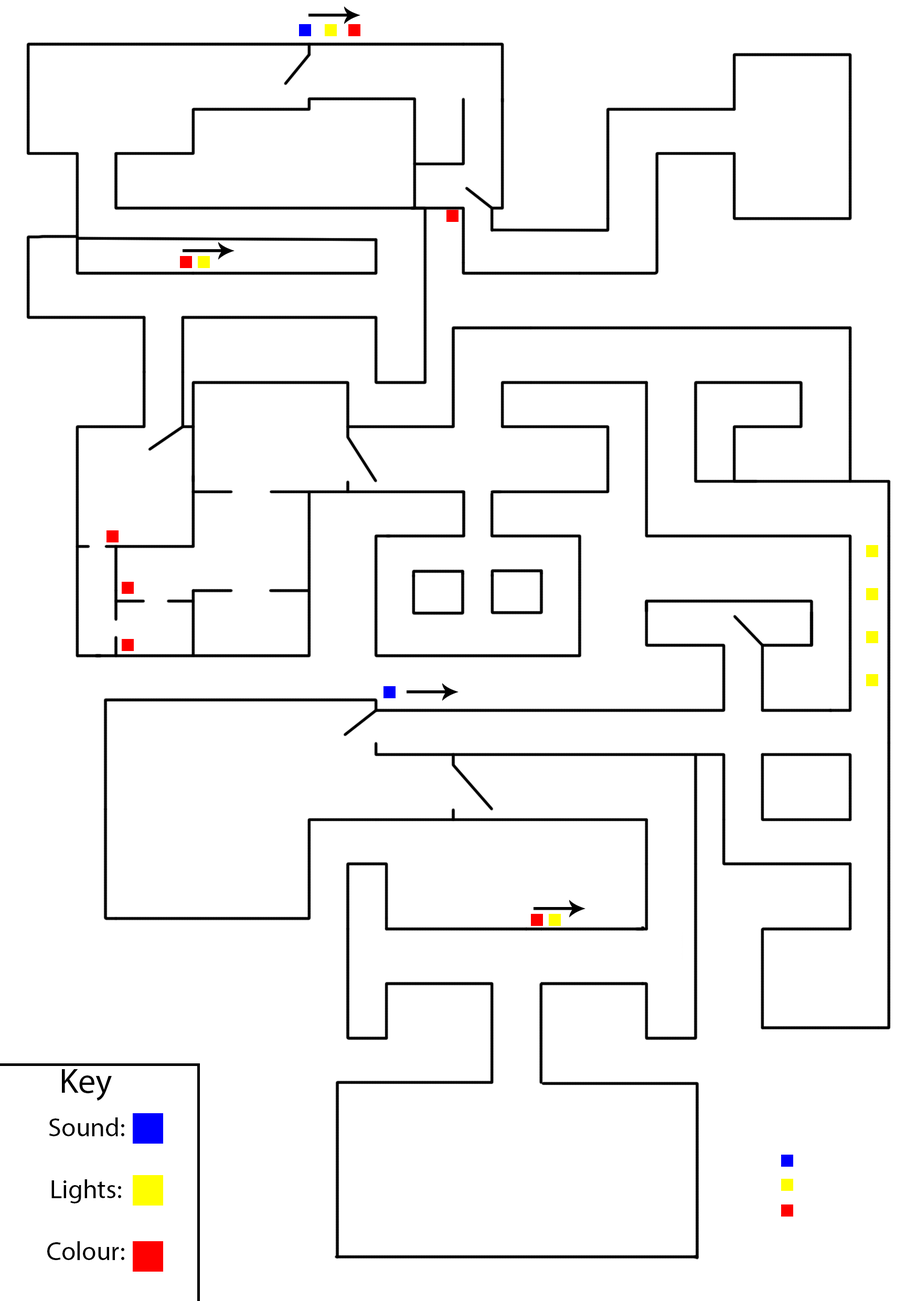
<style>
.page{position:relative;width:917px;height:1301px;background:#ffffff}
.page>*{position:absolute;margin:0}
.t1{font:35px "MyriadPro-Regular";color:#000000}
.t2{font:26.2px "MyriadPro-Regular";color:#000000}
</style>
<div class="page">
<p class="t1" style="left:62px;top:1069px;width:50px;height:31px">Key</p>
<p class="t2" style="left:49px;top:1117px;width:75px;height:19px">Sound:</p>
<p class="t2" style="left:51px;top:1179px;width:70px;height:24px">Lights:</p>
<p class="t2" style="left:47px;top:1241px;width:77px;height:19px">Colour:</p>
</div>
